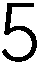
<style>
.page{position:relative;width:40px;height:64px;background:#ffffff}
.page>*{position:absolute;margin:0}
.t1{font:74px "OPPOSans-R";color:#000000}
</style>
<div class="page">
<p class="t1" style="left:2px;top:3px;width:35px;height:59px">5</p>
</div>
